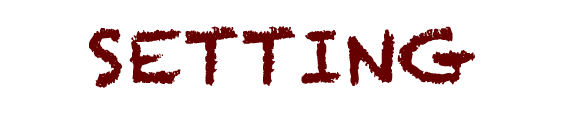
<style>
.page{position:relative;width:567px;height:113px;background:#ffffff}
.page>*{position:absolute;margin:0}
.t1{font:72px "Chalkduster";letter-spacing:0.005em;color:#660000;font-weight:bold}
</style>
<div class="page">
<p class="t1" style="left:89px;top:26px;width:386px;height:62px">SETTING</p>
</div>
